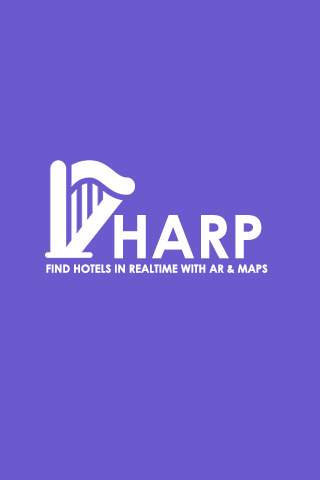
<style>
.page{position:relative;width:320px;height:480px;background:#6a5acd}
.page>*{position:absolute;margin:0}
.t1{font:60px "CenturyGothic-Bold";letter-spacing:0.005em;color:#ffffff}
.t2{font:11px "CenturyGothic-Bold";letter-spacing:0.005em;color:#ffffff}
</style>
<div class="page">
<p class="t1" style="left:114px;top:215px;width:148px;height:44px">HARP</p>
<p class="t2" style="left:46px;top:264px;width:222px;height:9px">FIND HOTELS IN REALTIME WITH AR &amp; MAPS</p>
</div>
